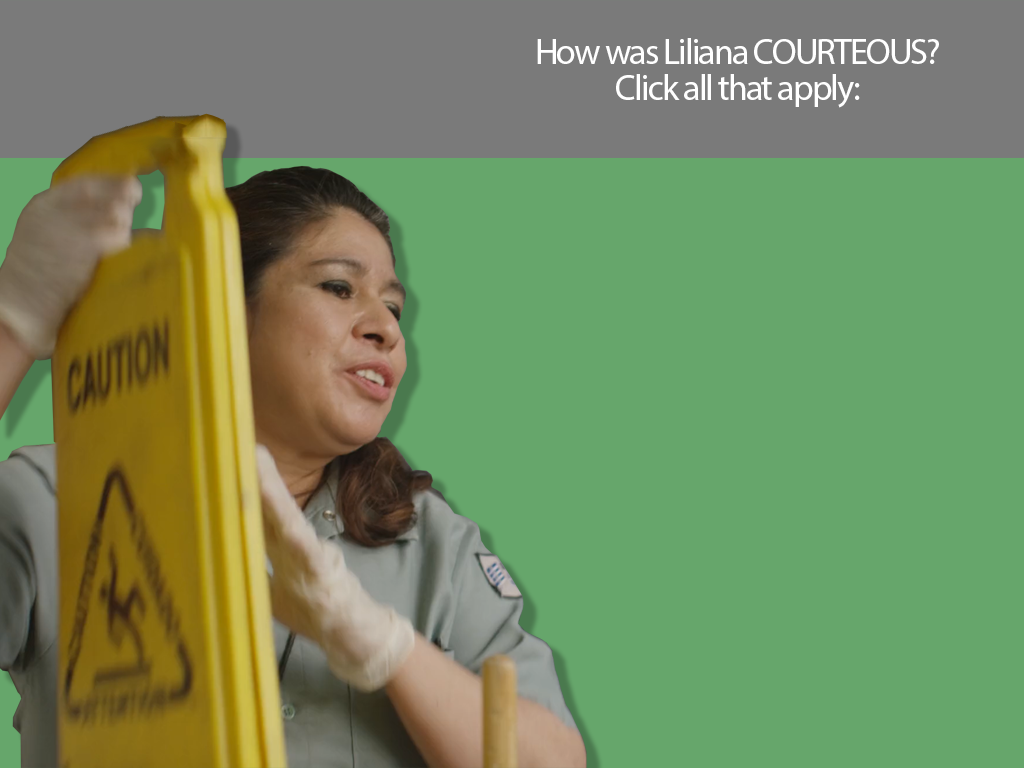
<style>
.page{position:relative;width:1024px;height:768px;background:#66a66b}
.page>*{position:absolute;margin:0}
.t1{font:36px/36px "MyriadPro-Regular";letter-spacing:-0.05em;color:#ffffff}
</style>
<div class="page">
<p class="t1" style="left:537px;top:38px;width:402px;height:70px;text-align:center">How was Liliana COURTEOUS?<br>Click all that apply:</p>
</div>
